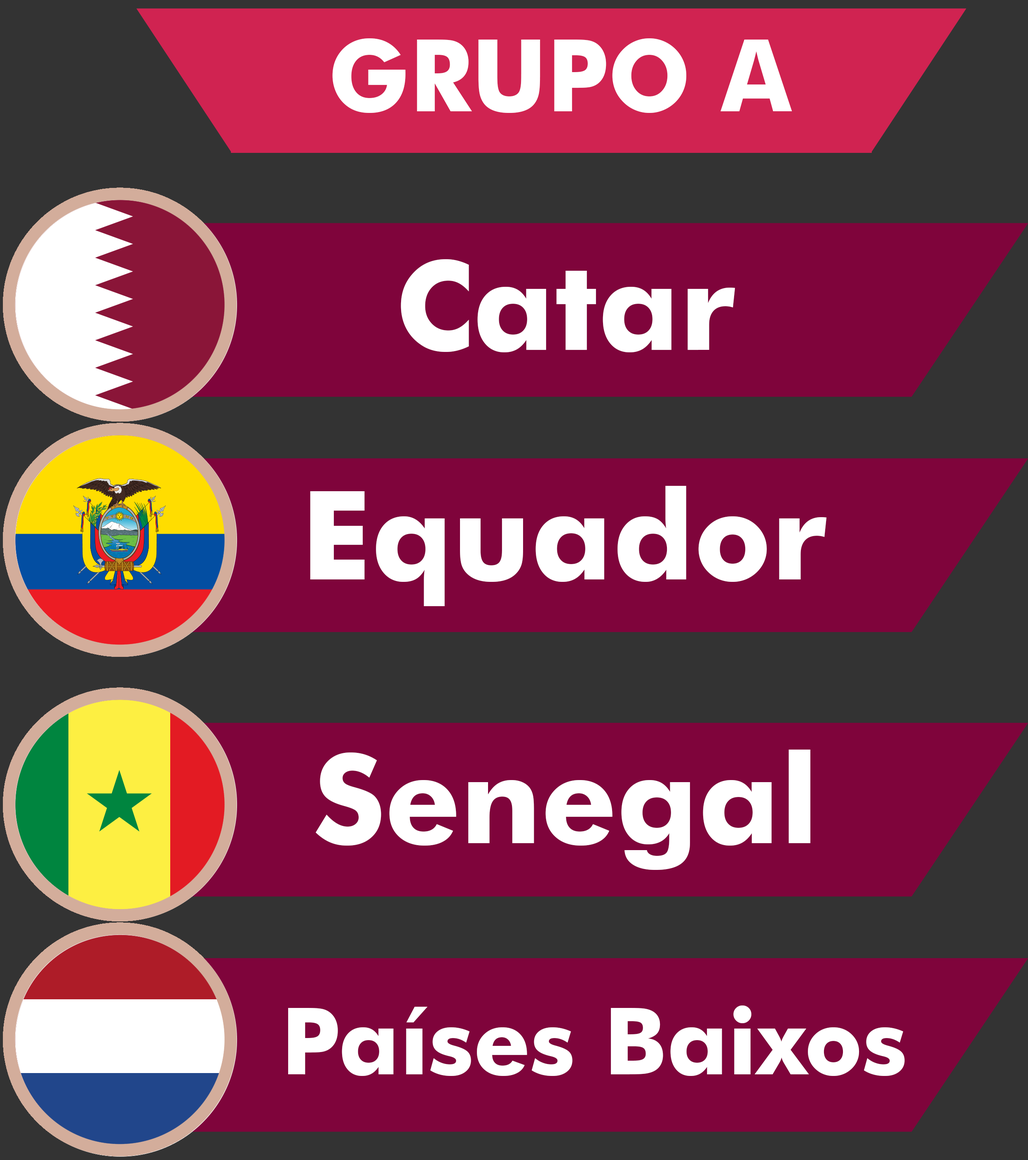
<style>
.page{position:relative;width:1028px;height:1160px;background:#7f043b}
.page>*{position:absolute;margin:0}
.t1{font:100.5px "FuturaBT-Bold";color:#ffffff;scale:0.96 1}
.t2{font:123.6px "FuturaBT-Bold";color:#ffffff}
.t3{font:92.7px "FuturaBT-Bold";color:#ffffff}
</style>
<div class="page">
<p class="t1" style="left:332px;top:38px;width:460px;height:75px">GRUPO A</p>
<p class="t2" style="left:401px;top:259px;width:334px;height:93px">Catar</p>
<p class="t2" style="left:310px;top:486px;width:517px;height:120px">Equador</p>
<p class="t2" style="left:315px;top:750px;width:495px;height:120px">Senegal</p>
<p class="t3" style="left:288px;top:1006px;width:617px;height:70px">Países Baixos</p>
</div>
